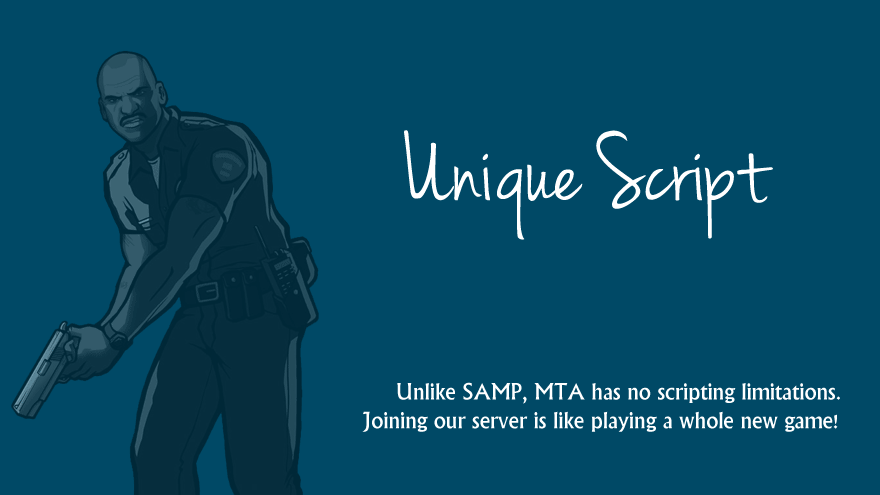
<style>
.page{position:relative;width:880px;height:495px;background:#004966}
.page>*{position:absolute;margin:0}
.t1{font:105px "JennaSue";color:#ffffff}
.t2{font:24px "Narkisim";color:#ffffff}
</style>
<div class="page">
<p class="t1" style="left:404px;top:130px;width:369px;height:110px">Unique Script</p>
<p class="t2" style="left:362px;top:382px;width:478px;height:50px;text-align:right">Unlike SAMP, MTA has no scripting limitations. <br>Joining our server is like playing a whole new game!</p>
</div>
